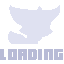
<style>
.page{position:relative;width:64px;height:64px;background:#ffffff}
.page>*{position:absolute;margin:0}
.t1{font:13.5px "04b19";color:#b8bbd6;scale:1.32 1}
</style>
<div class="page">
<p class="t1" style="left:0px;top:49px;width:63px;height:11px">LOADING</p>
</div>
